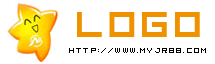
<style>
.page{position:relative;width:215px;height:64px;background:#ffffff}
.page>*{position:absolute;margin:0}
.t1{font:29.6px "04b08";letter-spacing:0.1em;color:#ee9200}
.t2{font:6px "04b08";letter-spacing:0.2em;color:#000000}
</style>
<div class="page">
<p class="t1" style="left:77px;top:12px;width:123px;height:25px">LOGO</p>
<p class="t2" style="left:69px;top:48px;width:137px;height:5px">http://www.myjr88.com</p>
</div>
